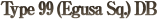
<style>
.page{position:relative;width:157px;height:19px;background:#ffffff}
.page>*{position:absolute;margin:0}
.t1{font:18px "RyuminPro-ExBold";letter-spacing:-0.095em;color:#4a3f32;font-weight:bold;scale:0.9 1}
</style>
<div class="page">
<p class="t1" style="left:0px;top:1px;width:157px;height:18px">Type 99 (Egusa Sq.) DB</p>
</div>
